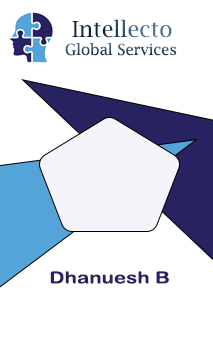
<style>
.page{position:relative;width:213px;height:339px;background:#ffffff}
.page>*{position:absolute;margin:0}
.t1{font:22.2px "LucidaBright"}
.t2{font:15.3px "LucidaBright"}
.t3{font:16.7px "ArialRoundedMTBold";color:#272361;scale:1.24 1}
</style>
<div class="page">
<p class="t1" style="left:72px;top:19px;width:100px;height:19px">Intellecto</p>
<p class="t2" style="left:65px;top:43px;width:112px;height:13px">Global Services</p>
<p class="t3" style="left:50px;top:271px;width:119px;height:13px">Dhanuesh B</p>
</div>
